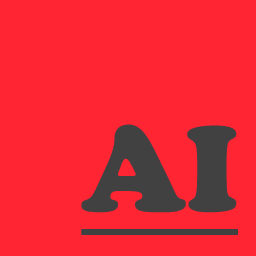
<style>
.page{position:relative;width:256px;height:256px;background:#ff2533}
.page>*{position:absolute;margin:0}
.t1{font:120px "CooperBlackStd";color:#414142;text-decoration:underline}
</style>
<div class="page">
<p class="t1" style="left:81px;top:124px;width:157px;height:111px">AI</p>
</div>
